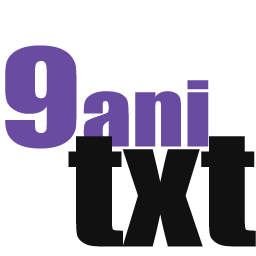
<style>
.page{position:relative;width:256px;height:256px;background:#ffffff}
.page>*{position:absolute;margin:0}
.t1{font:83.5px "Impact";color:#694ba1;scale:1.2 1}
.t2{font:125.2px "Impact";color:#694ba1;scale:1.2 1}
.t3{font:150px "Impact";color:#111111;scale:1.2 1}
</style>
<div class="page">
<p class="t1" style="left:5px;top:45px;width:204px;height:104px"><span class="t2">9</span>ani</p>
<p class="t3" style="left:68px;top:136px;width:188px;height:111px">txt</p>
</div>
